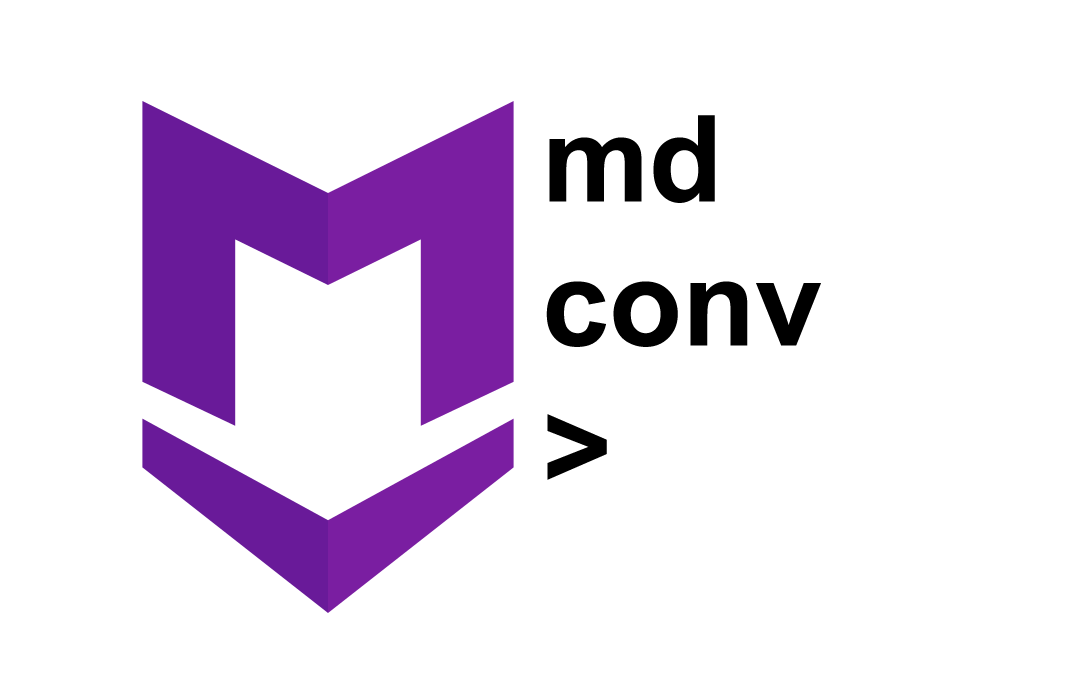
<style>
.page{position:relative;width:1077px;height:680px;background:#ffffff}
.page>*{position:absolute;margin:0}
.t1{font:120px "Arial-BoldMT";color:#000000}
</style>
<div class="page">
<p class="t1" style="left:546px;top:115px;width:275px;height:365px">md<br>conv <br>&gt;</p>
</div>
